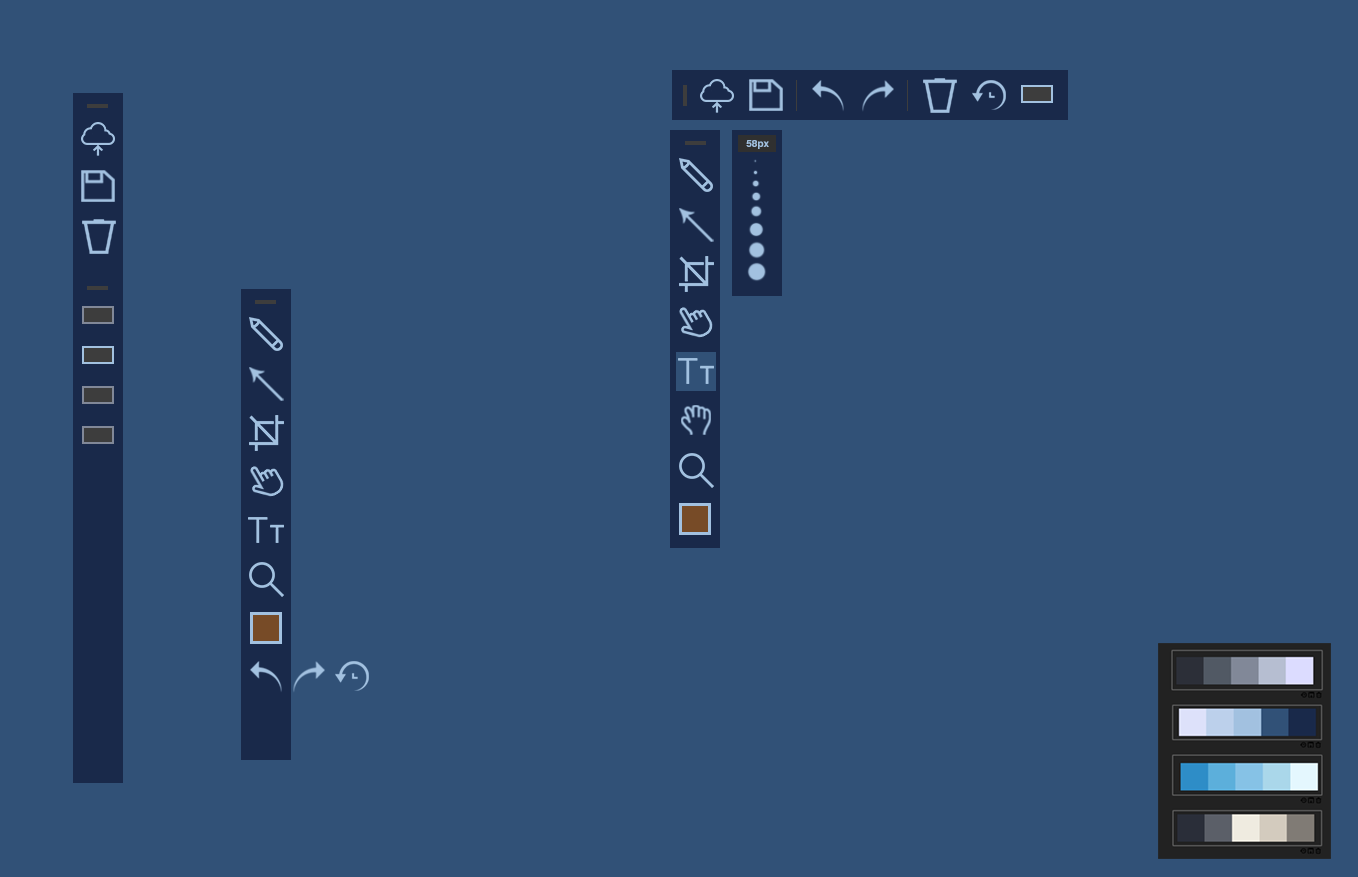
<style>
.page{position:relative;width:1358px;height:877px;background:#315177}
.page>*{position:absolute;margin:0}
.t1{font:10px "Helvetica-Bold";color:#a2c1e0}
</style>
<div class="page">
<p class="t1" style="left:746px;top:140px;width:23px;height:9px">58px</p>
</div>
